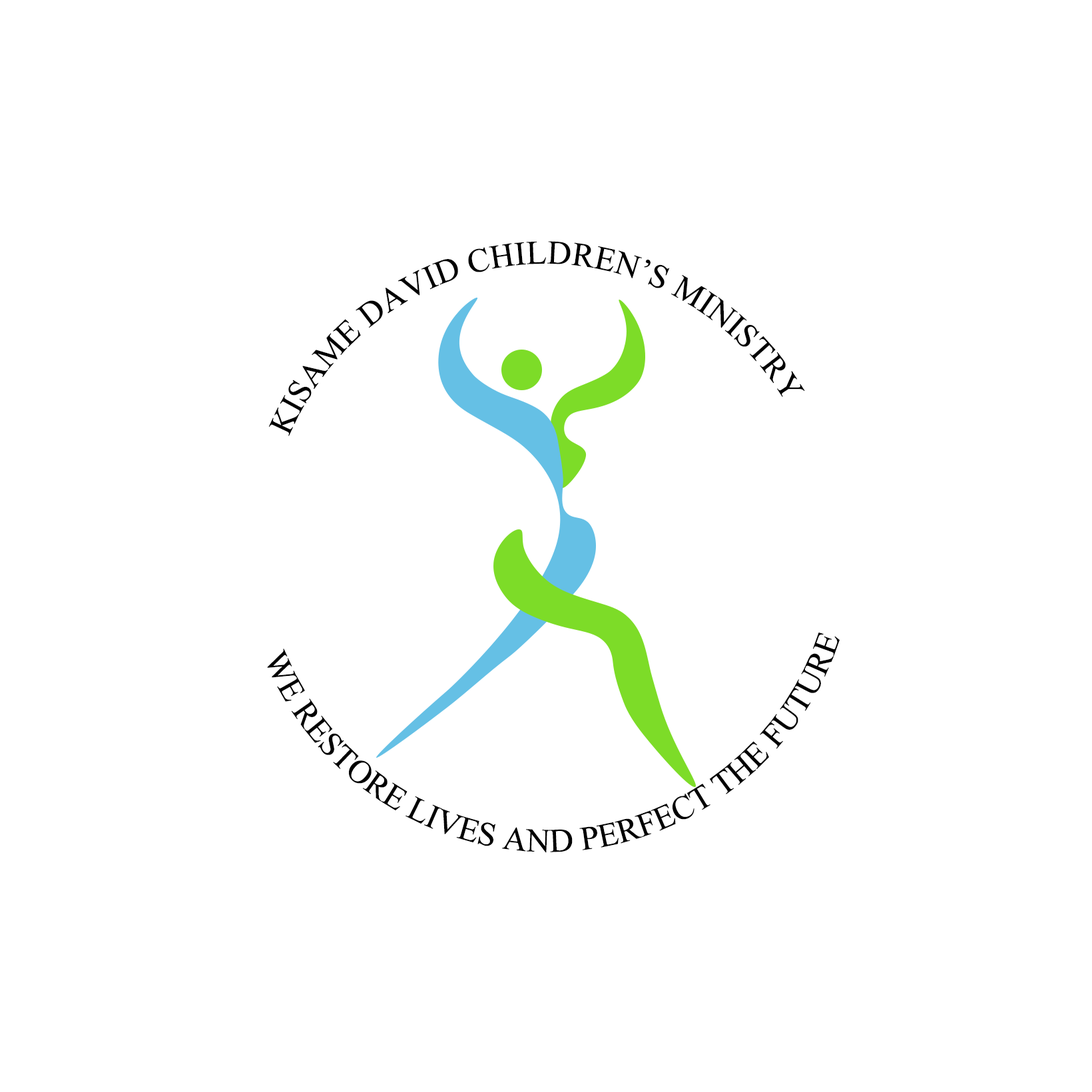
<style>
.page{position:relative;width:1092px;height:1092px;background:#ffffff}
.page>*{position:absolute;margin:0}
.t1{font:33.3px "TimesNewRomanPSMT";color:#000000}
</style>
<div class="page">
<p class="t1" style="left:268px;top:241px;width:537px;height:195px;text-align:center">KISAME DAVID CHILDREN’S MINISTRY</p>
<p class="t1" style="left:267px;top:632px;width:573px;height:221px;text-align:center">WE RESTORE LIVES AND PERFECT THE FUTURE</p>
</div>
